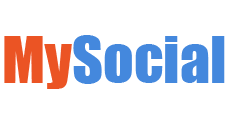
<style>
.page{position:relative;width:230px;height:120px;background:#ffffff}
.page>*{position:absolute;margin:0}
.t1{font:60px "Impact";color:#4488dd}
.t2{font:60px "Impact";color:#eb5424}
</style>
<div class="page">
<p class="t1" style="left:4px;top:35px;width:221px;height:54px"><span class="t2">My</span>Social</p>
</div>
